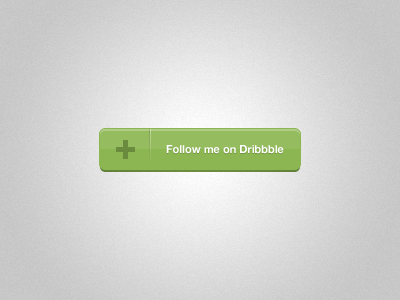
<style>
.page{position:relative;width:400px;height:300px}
.page>*{position:absolute;margin:0}
.t1{font:11px "HelveticaNeue-Bold";color:#ffffff}
</style>
<div class="page">
<p class="t1" style="left:166px;top:145px;width:118px;height:9px">Follow me on Dribbble</p>
</div>
